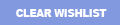
<style>
.page{position:relative;width:120px;height:25px;background:#8299df}
.page>*{position:absolute;margin:0}
.t1{font:18.2px "Arial-Black";color:#ffffff;scale:0.9 1}
</style>
<div class="page">
<p class="t1" style="left:16px;top:9px;width:91px;height:8px">CLEAR WISHLIST</p>
</div>
